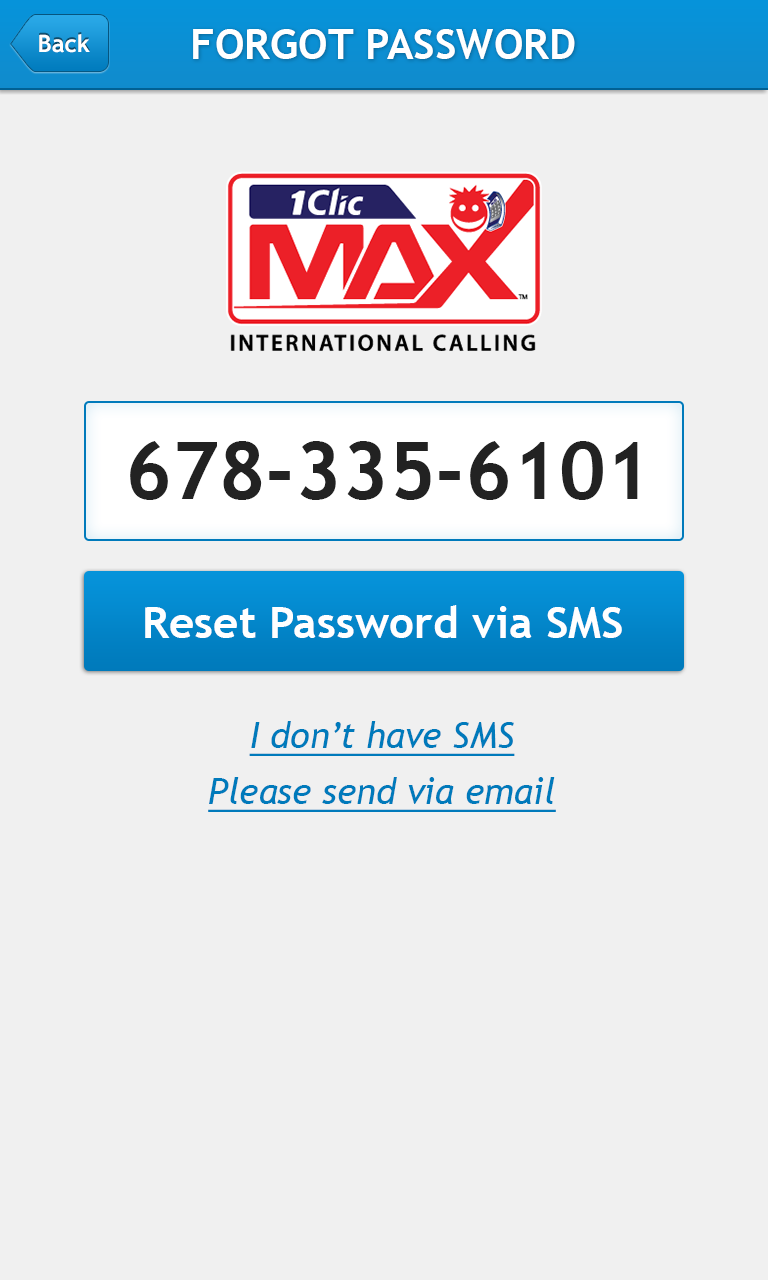
<style>
.page{position:relative;width:768px;height:1280px;background:#f0f0f0}
.page>*{position:absolute;margin:0}
.t1{font:42px "TrebuchetMS-Bold";color:#ffffff}
.t2{font:24px "TrebuchetMS-Bold";color:#ffffff}
.t3{font:80px "TrebuchetMS-Bold";color:#222222}
.t4{font:44px "TrebuchetMS-Bold";color:#ffffff}
.t5{font:36px/56px "TrebuchetMS-Italic";color:#007abb;text-decoration:underline}
</style>
<div class="page">
<p class="t1" style="left:193px;top:29px;width:382px;height:30px">FORGOT PASSWORD</p>
<p class="t2" style="left:39px;top:34px;width:51px;height:19px">Back</p>
<p class="t3" style="left:130px;top:441px;width:508px;height:59px">678-335-6101</p>
<p class="t4" style="left:145px;top:605px;width:477px;height:33px">Reset Password via SMS</p>
<p class="t5" style="left:208px;top:721px;width:348px;height:91px;text-align:center">I don’t have SMS<br>Please send via email</p>
</div>
